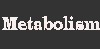
<style>
.page{position:relative;width:100px;height:49px;background:#333333}
.page>*{position:absolute;margin:0}
.t1{font:19px "LatinWide";color:#f8efef;scale:0.52 1}
</style>
<div class="page">
<p class="t1" style="left:2px;top:16px;width:99px;height:14px">Metabolism</p>
</div>
